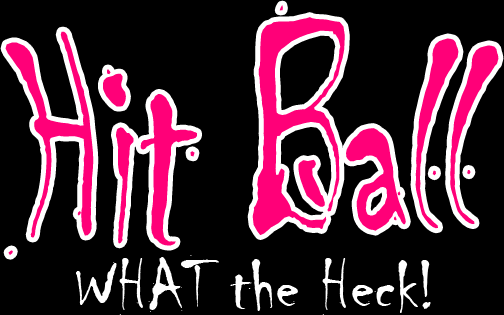
<style>
.page{position:relative;width:504px;height:315px;background:#000000}
.page>*{position:absolute;margin:0}
.t1{font:257px "Chiller-Regular";color:#ff0078}
.t2{font:72px "Chiller-Regular";color:#ffffff}
</style>
<div class="page">
<p class="t1" style="left:5px;top:5px;width:494px;height:250px">Hit Ball</p>
<p class="t2" style="left:76px;top:255px;width:355px;height:60px">WHAT the Heck!</p>
</div>
